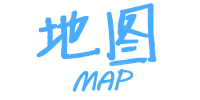
<style>
.page{position:relative;width:200px;height:100px;background:#ffffff}
.page>*{position:absolute;margin:0}
.t1{font:58.7px "SentyMARUKO";letter-spacing:-0.02em;color:#4aacff;text-transform:uppercase;font-weight:bold}
.t2{font:26.7px "MVBoli";letter-spacing:-0.02em;color:#4aacff;text-transform:uppercase;font-weight:bold}
</style>
<div class="page">
<p class="t1" style="left:36px;top:3px;width:121px;height:63px">地图</p>
<p class="t2" style="left:72px;top:69px;width:62px;height:23px">Map</p>
</div>
